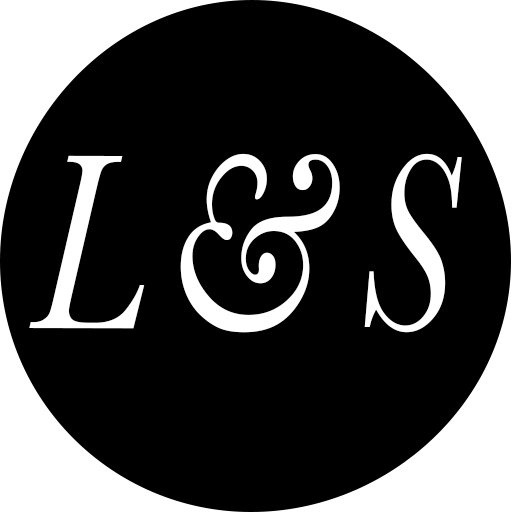
<style>
.page{position:relative;width:512px;height:512px;background:#000000}
.page>*{position:absolute;margin:0}
.t1{font:260px "Baskerville-Italic";letter-spacing:0.125em;color:#ffffff;scale:0.76 1}
</style>
<div class="page">
<p class="t1" style="left:29px;top:153px;width:433px;height:180px">L&amp;S</p>
</div>
